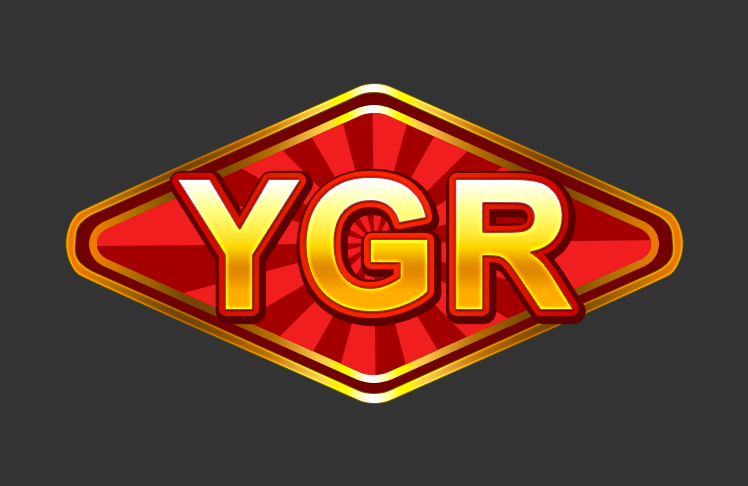
<style>
.page{position:relative;width:748px;height:486px;background:#333333}
.page>*{position:absolute;margin:0}
.t1{font:180px "Arial-BoldMT";letter-spacing:-0.03em;font-weight:bold}
.t2{font:180px "Arial-BoldMT";font-weight:bold}
</style>
<div class="page">
<p class="t1" style="left:177px;top:177px;width:396px;height:135px">Y<span class="t2">G</span>R</p>
</div>
